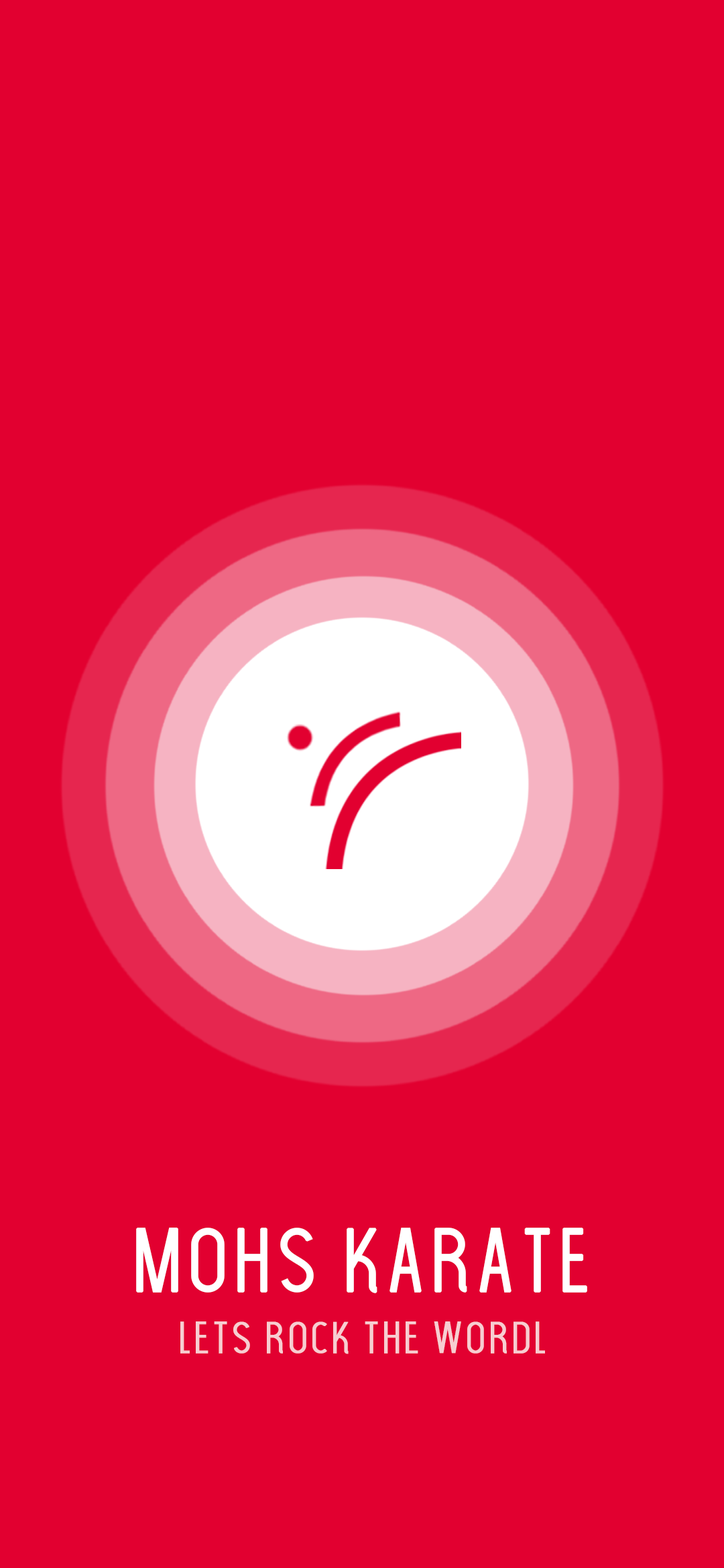
<style>
.page{position:relative;width:724px;height:1568px;background:#e20030}
.page>*{position:absolute;margin:0}
.t1{font:85.1px "TheLightFont";color:#ffffff;font-weight:bold}
.t2{font:42.6px "TheLightFont";color:#f7cdd1;font-weight:bold}
</style>
<div class="page">
<p class="t1" style="left:136px;top:1228px;width:451px;height:65px">mohs karate</p>
<p class="t2" style="left:180px;top:1321px;width:365px;height:33px">lets rock the wordl</p>
</div>
